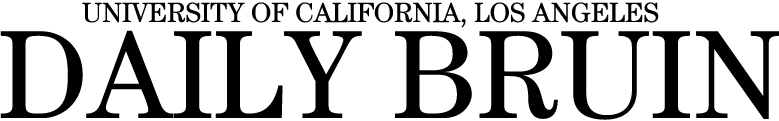
<style>
.page{position:relative;width:779px;height:121px;background:#ffffff}
.page>*{position:absolute;margin:0}
.t1{font:27.8px "CenturyStd-Book";color:#000000;text-transform:uppercase}
.t2{font:125.8px "CenturyStd-Book";color:#000000;text-transform:uppercase}
</style>
<div class="page">
<p class="t1" style="left:82px;top:2px;width:577px;height:26px">UNIVERSITY OF CALIFORNIA, LOS ANGELES</p>
<p class="t2" style="left:0px;top:30px;width:780px;height:90px">DAILY BRUIN</p>
</div>
